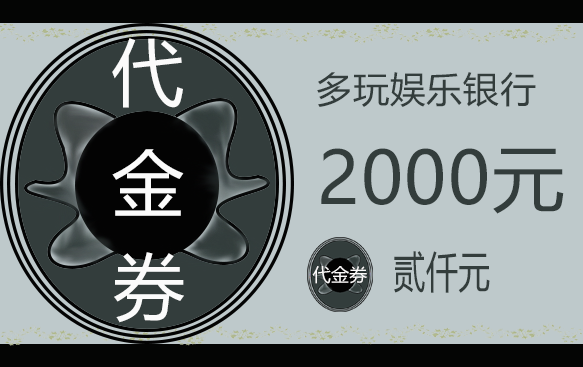
<style>
.page{position:relative;width:583px;height:367px;background:#bec9cb}
.page>*{position:absolute;margin:0}
.t1{font:72px "MicrosoftYaHei";letter-spacing:0.02em;color:#fbfbfb}
.t2{font:36px "MicrosoftYaHei";letter-spacing:0.02em;color:#333d3c}
.t3{font:72px "MicrosoftYaHei";letter-spacing:0.02em;color:#333d3c}
.t4{font:43.1px "MicrosoftYaHei";letter-spacing:0.02em;color:#333d3c;scale:0.74 1}
.t5{font:18px "MicrosoftYaHei";letter-spacing:0.02em;color:#fcfafa}
</style>
<div class="page">
<p class="t1" style="left:112px;top:38px;width:71px;height:70px">代</p>
<p class="t2" style="left:317px;top:72px;width:219px;height:35px">多玩娱乐银行</p>
<p class="t1" style="left:112px;top:149px;width:72px;height:67px">金</p>
<p class="t3" style="left:321px;top:148px;width:243px;height:66px">2000元</p>
<p class="t1" style="left:114px;top:252px;width:70px;height:71px">券</p>
<p class="t4" style="left:394px;top:251px;width:96px;height:42px">贰仟元</p>
<p class="t5" style="left:312px;top:266px;width:55px;height:18px">代金券</p>
</div>
